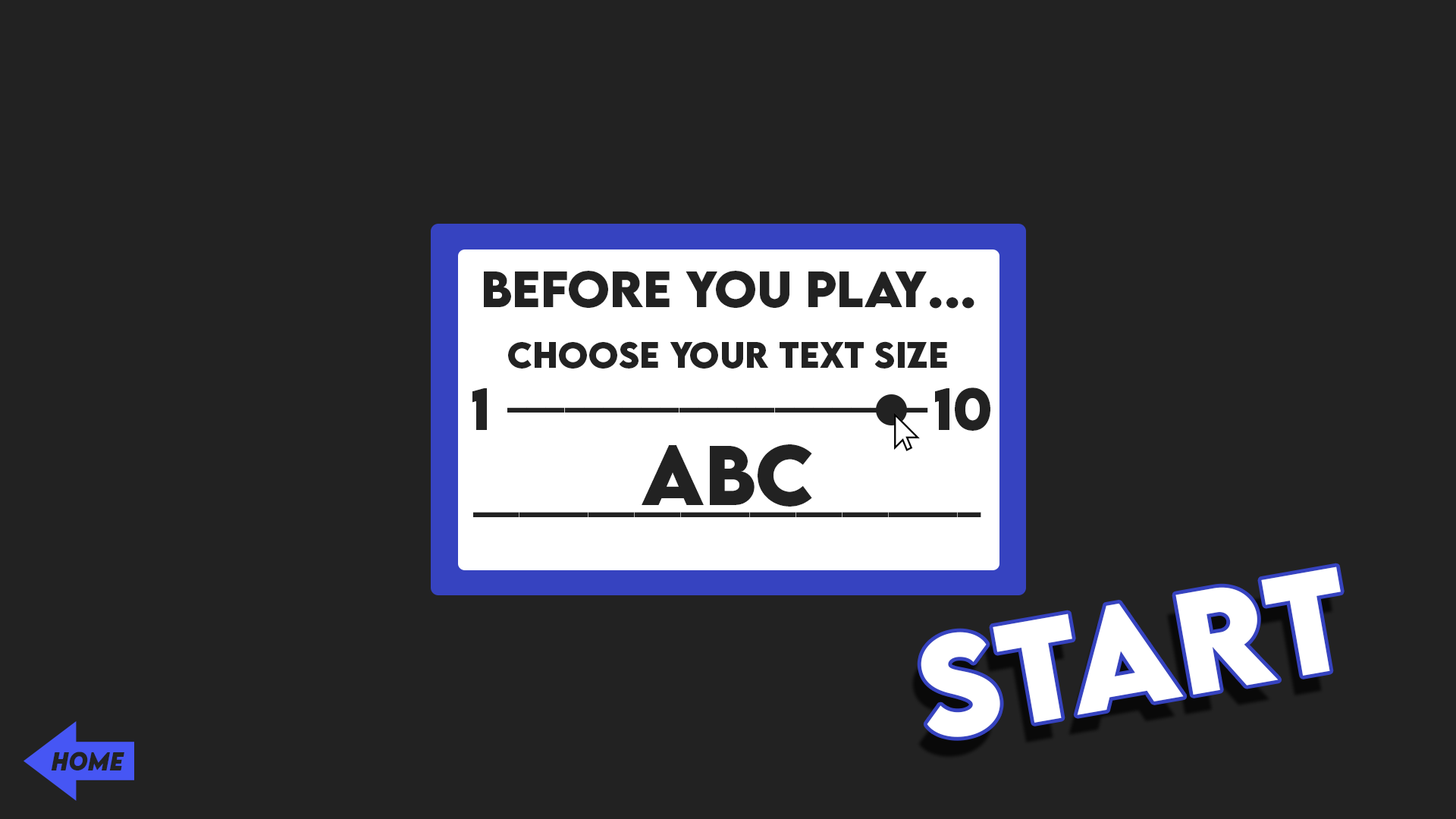
<style>
.page{position:relative;width:1456px;height:819px;background:#222222}
.page>*{position:absolute;margin:0}
.t1{font:45px "LEMONMILK-Bold";color:#222222}
.t2{font:32.4px "LEMONMILK-Bold";color:#222222}
.t3{font:52.7px "LEMONMILK-Bold";color:#222222;scale:0.96 1}
.t4{font:36.2px "LEMONMILK-Bold";color:#222222;scale:0.83 1}
.t5{font:75.1px "LEMONMILK-Bold";color:#222222}
.t6{font:36.3px "LEMONMILK-Bold";color:#222222}
.t7{font:128.5px "LEMONMILK-Bold";color:#ffffff}
</style>
<div class="page">
<p class="t1" style="left:484px;top:271px;width:490px;height:38px">...before you play</p>
<p class="t2" style="left:508px;top:341px;width:439px;height:28px">choose your text size</p>
<p class="t3" style="left:472px;top:388px;width:15px;height:42px">1</p>
<p class="t3" style="left:935px;top:388px;width:55px;height:43px">10</p>
<p class="t4" style="left:507px;top:407px;width:421px;height:6px">______________________</p>
<p class="t5" style="left:642px;top:444px;width:170px;height:63px">abc</p>
<p class="t6" style="left:473px;top:512px;width:508px;height:5px">______________________</p>
<p class="t7" style="left:921px;top:566px;width:420px;height:171px;rotate:-10deg">start</p>
</div>
